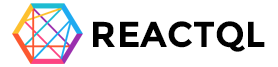
<style>
.page{position:relative;width:278px;height:67px;background:#ffffff}
.page>*{position:absolute;margin:0}
.t1{font:36px "Montserrat-Bold";color:#000000}
</style>
<div class="page">
<p class="t1" style="left:93px;top:21px;width:172px;height:31px">REACTQL</p>
</div>
